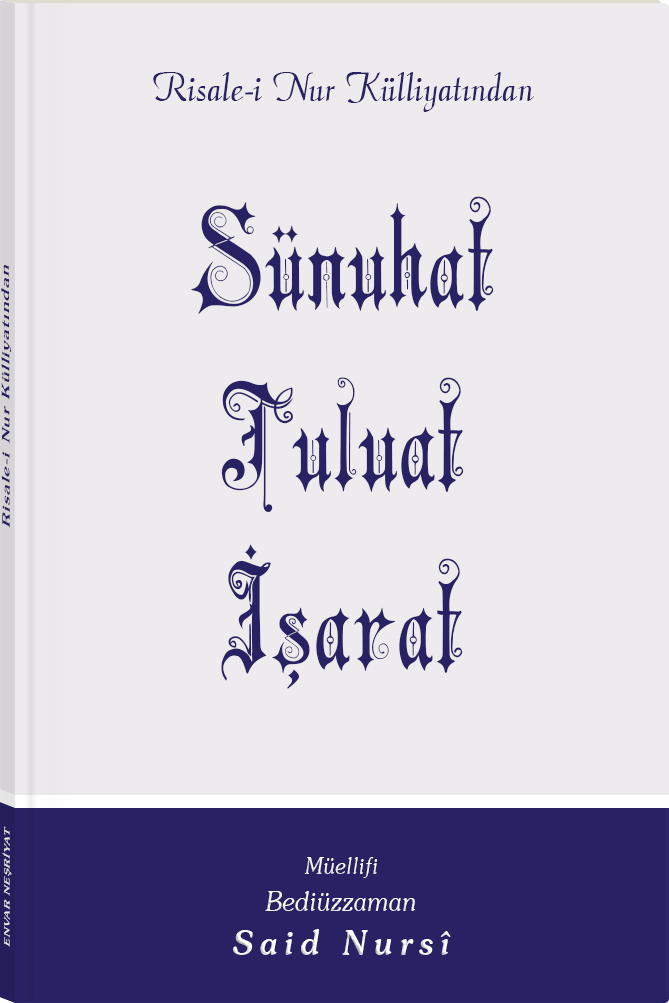
<style>
.page{position:relative;width:669px;height:1003px;background:#edebed}
.page>*{position:absolute;margin:0}
.t1{font:45.3px "Barla © 072 Aria ScriptScriptSSi";color:#282264;scale:0.94 1}
.t2{font:139.7px/180.9px "Barla © 001 Liva Nur";letter-spacing:-0.001em;color:#282264;scale:0.93 1}
.t3{font:11.4px "Souvenir-Medium";letter-spacing:0.08em;color:#282264;scale:1.65 1}
.t4{font:8.3px "Souvenir-Medium";letter-spacing:0.08em;color:#e5e5e5;scale:1.43 1}
.t5{font:27.1px/37.8px "Souvenir-LightItalic";color:#ffffff;scale:0.92 1}
.t6{font:22.8px/39.8px "Souvenir-LightItalic";color:#ffffff;scale:0.92 1}
.t7{font:33.9px/43.8px "Souvenir-MediumItalic";letter-spacing:0.2em;color:#ffffff;scale:0.92 1}
</style>
<div class="page">
<p class="t1" style="left:153px;top:72px;width:381px;height:40px">Risale-i Nur Külliyatından</p>
<p class="t2" style="left:191px;top:196px;width:303px;height:493px;text-align:center">Sünuhat<br>Tuluat<br>İşarat</p>
<p class="t3" style="left:1px;top:265px;width:10px;height:263px;rotate:-90deg">Risale-i Nur Külliyatından</p>
<p class="t4" style="left:2px;top:826px;width:10px;height:121px;rotate:-90deg">ENVAR NEŞRİYAT</p>
<p class="t5" style="left:233px;top:857px;width:218px;height:98px;text-align:center"><span class="t6">Müellifi<br></span>Bediüzzaman<br><span class="t7">Said Nursî</span></p>
</div>
